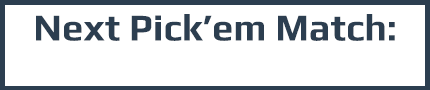
<style>
.page{position:relative;width:430px;height:90px;background:#ffffff}
.page>*{position:absolute;margin:0}
.t1{font:38px "Play-Bold";color:#2c3e50}
</style>
<div class="page">
<p class="t1" style="left:36px;top:14px;width:359px;height:27px">Next Pick’em Match:</p>
</div>
